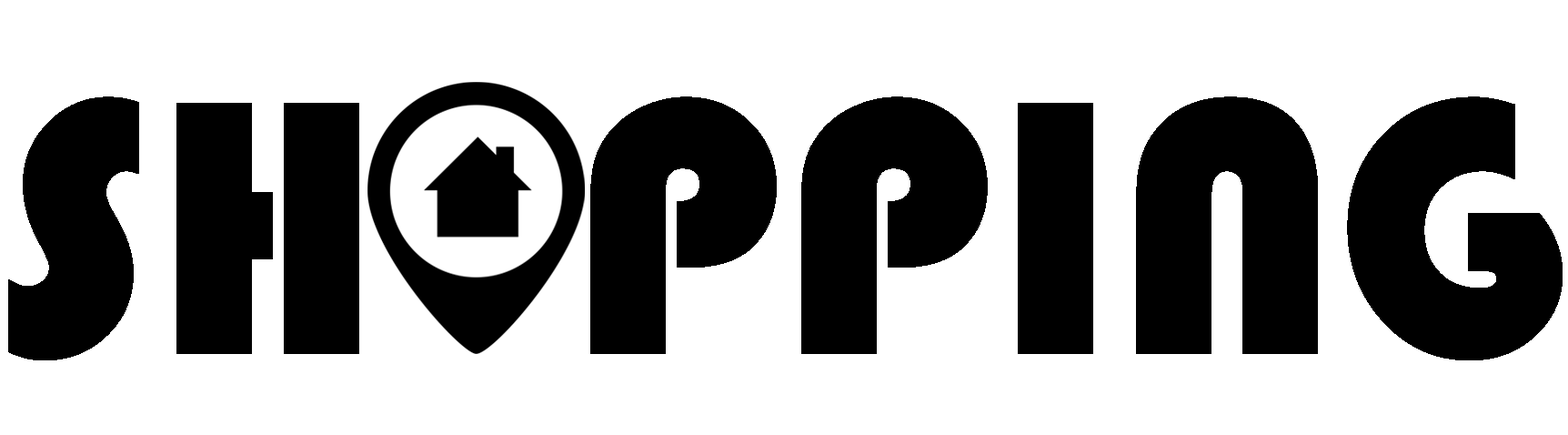
<style>
.page{position:relative;width:1568px;height:435px;background:#ffffff}
.page>*{position:absolute;margin:0}
.t1{font:375.2px "Bauhaus93";color:#000000}
</style>
<div class="page">
<p class="t1" style="left:8px;top:96px;width:1555px;height:264px">SH  PPING</p>
</div>
